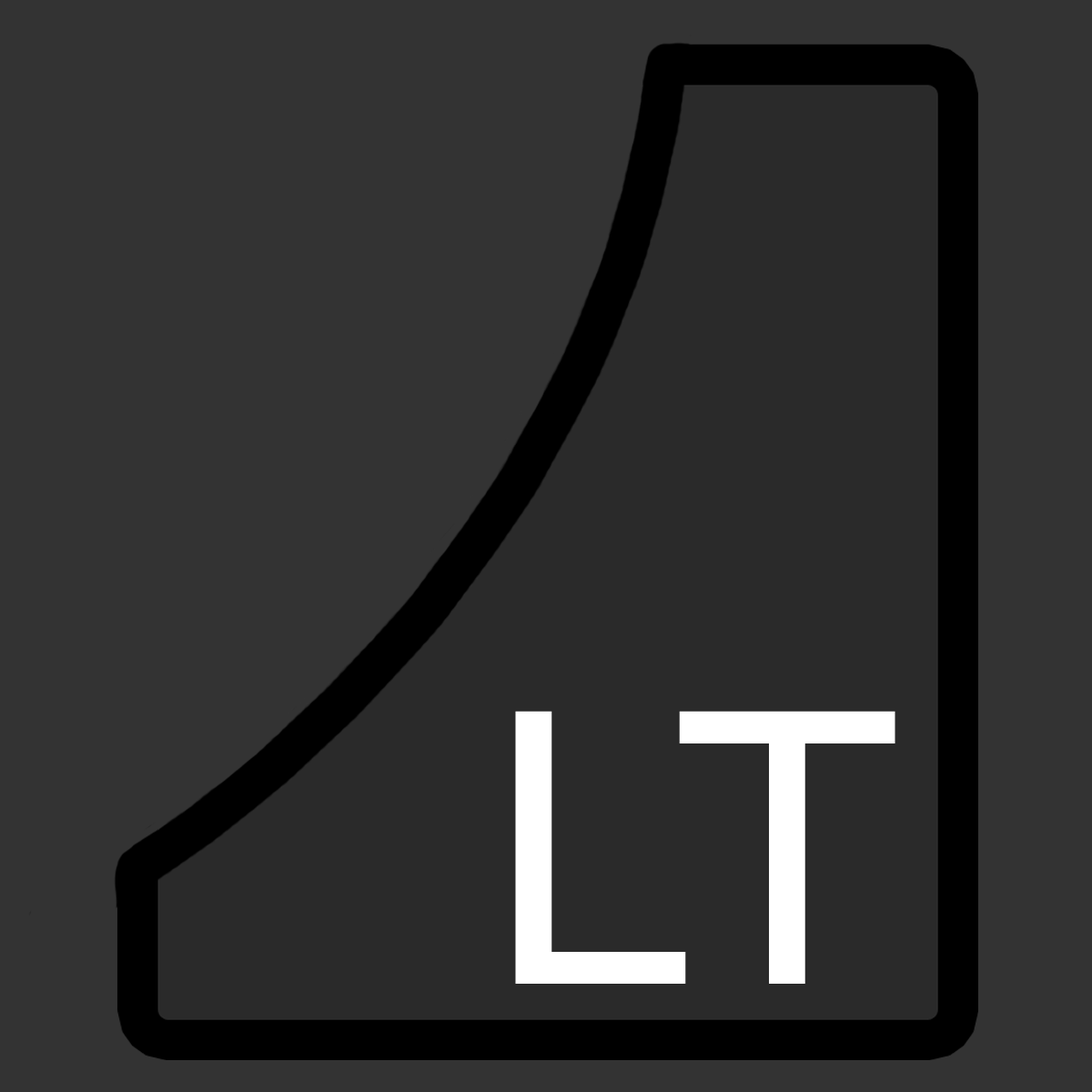
<style>
.page{position:relative;width:1092px;height:1092px;background:#333333}
.page>*{position:absolute;margin:0}
.t1{font:379.2px "ArialMT";color:#ffffff}
</style>
<div class="page">
<p class="t1" style="left:515px;top:711px;width:380px;height:273px">LT</p>
</div>
